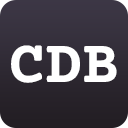
<style>
.page{position:relative;width:128px;height:128px}
.page>*{position:absolute;margin:0}
.t1{font:62px "CourierPrime-Bold";color:#ffffff}
</style>
<div class="page">
<p class="t1" style="left:11px;top:45px;width:106px;height:38px">CDB</p>
</div>
